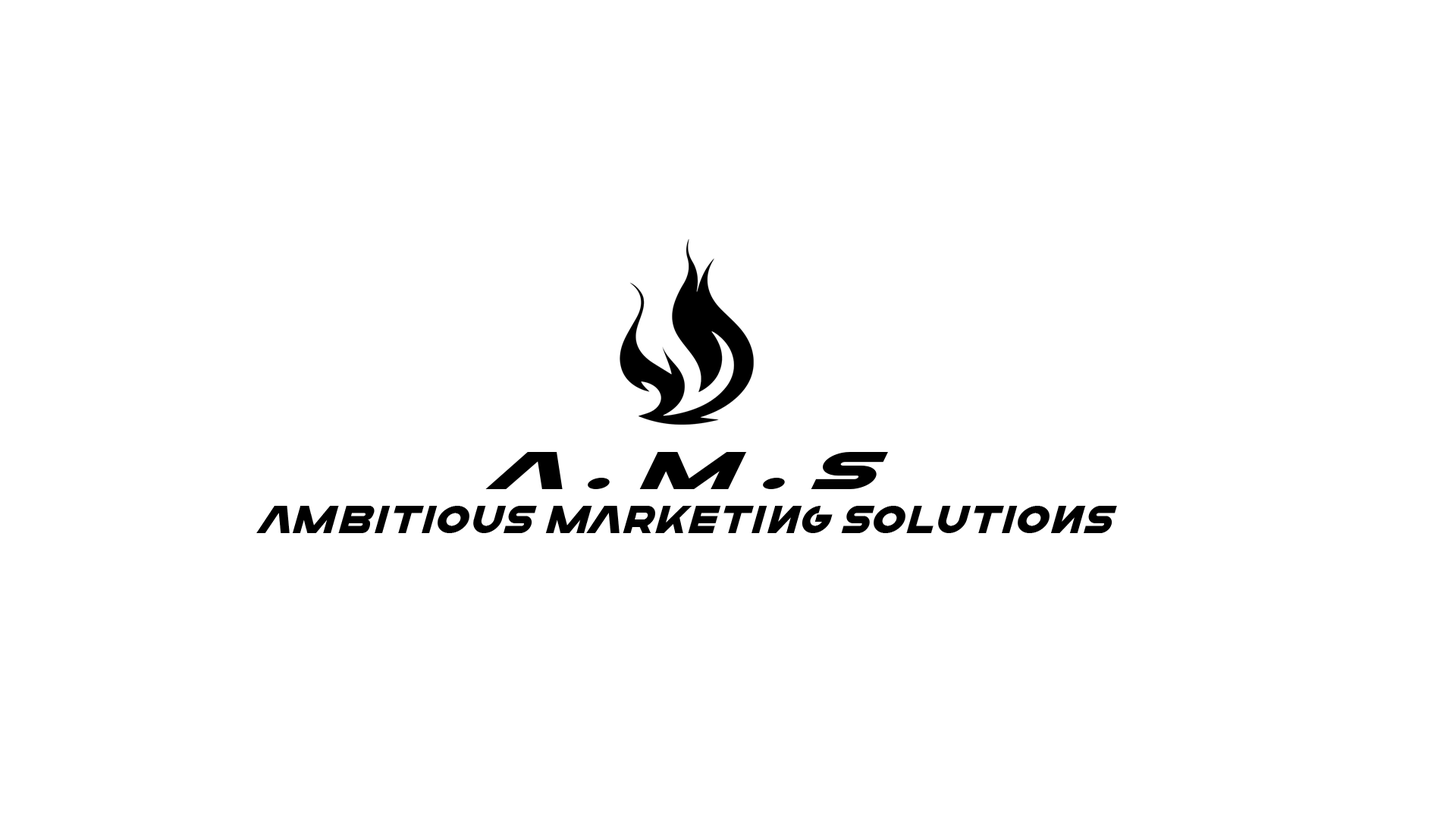
<style>
.page{position:relative;width:1456px;height:819px;background:#ffffff}
.page>*{position:absolute;margin:0}
.t1{font:54.6px "FEARLogo-Italic";color:#000000;scale:1.71 1}
.t2{font:40.2px "FEARLogo-Italic";color:#000000}
</style>
<div class="page">
<p class="t1" style="left:485px;top:452px;width:403px;height:37px">A . M . S</p>
<p class="t2" style="left:256px;top:506px;width:861px;height:27px">Ambitious Marketing Solutions</p>
</div>
